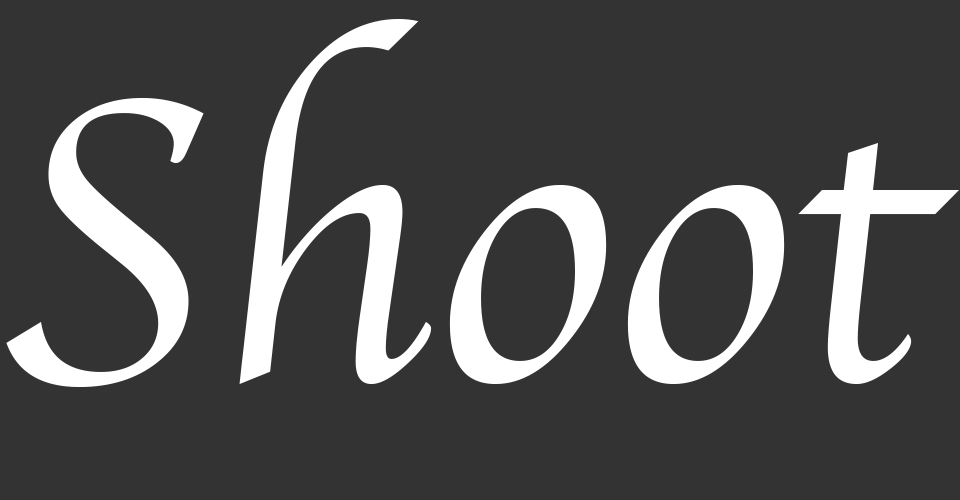
<style>
.page{position:relative;width:960px;height:500px;background:#333333}
.page>*{position:absolute;margin:0}
.t1{font:415.8px "Apple-Chancery";color:#ffffff}
</style>
<div class="page">
<p class="t1" style="left:6px;top:19px;width:954px;height:368px">Shoot</p>
</div>
